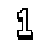
<style>
.page{position:relative;width:48px;height:48px;background:#ffffff}
.page>*{position:absolute;margin:0}
.t1{font:36px "KarmaFuture-Regular";color:#010101}
</style>
<div class="page">
<p class="t1" style="left:17px;top:8px;width:16px;height:32px">1</p>
</div>
